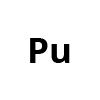
<style>
.page{position:relative;width:100px;height:100px;background:#ffffff}
.page>*{position:absolute;margin:0}
.t1{font:35px "OpenSans-Bold";color:#000000}
</style>
<div class="page">
<p class="t1" style="left:30px;top:38px;width:40px;height:25px">Pu</p>
</div>
